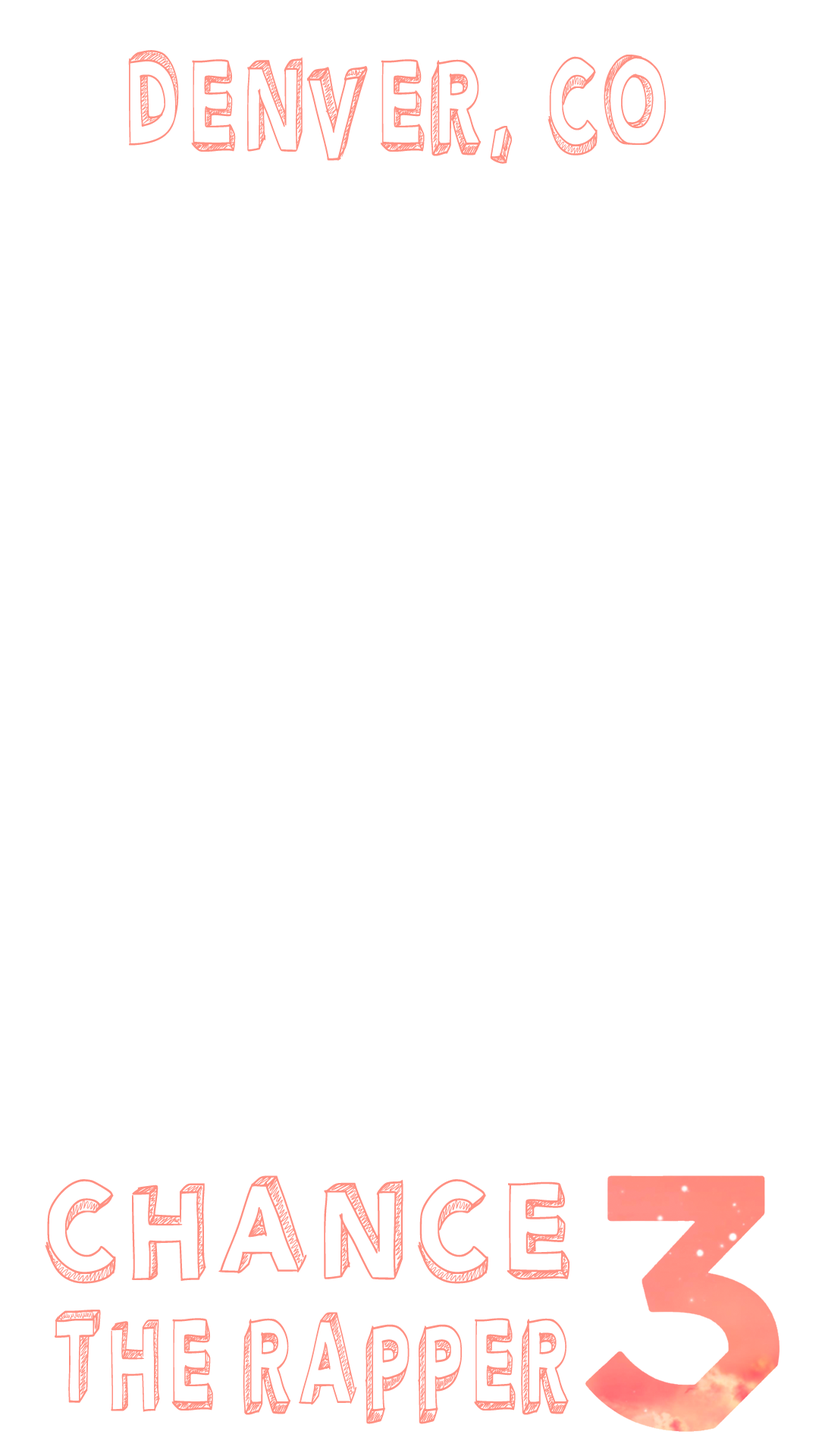
<style>
.page{position:relative;width:819px;height:1456px;background:#ffffff}
.page>*{position:absolute;margin:0}
.t1{font:119.5px "PWPerspective";letter-spacing:0.05em;color:#ff9082;scale:0.62 1}
.t2{font:126.4px "PWPerspective";letter-spacing:0.05em;color:#ff9082;scale:0.84 1}
.t3{font:119.5px "PWPerspective";letter-spacing:0.05em;color:#ff9082;scale:0.58 1}
</style>
<div class="page">
<p class="t1" style="left:128px;top:50px;width:538px;height:114px">DENVER, CO</p>
<p class="t2" style="left:45px;top:1175px;width:525px;height:109px">CHANCE</p>
<p class="t3" style="left:55px;top:1310px;width:514px;height:114px">THE RAPPER</p>
</div>
